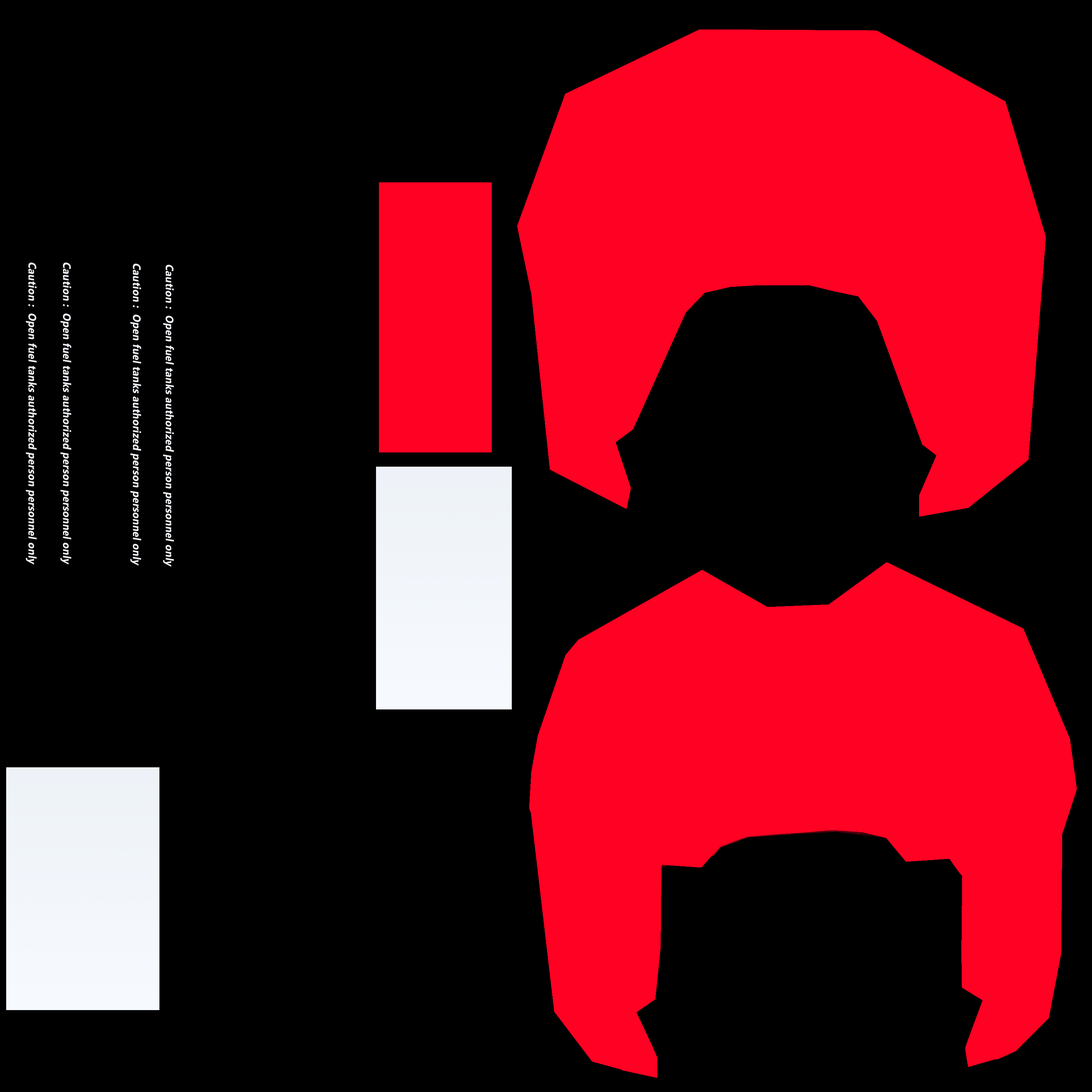
<style>
.page{position:relative;width:1092px;height:1092px;background:#000000}
.page>*{position:absolute;margin:0}
.t1{font:10.9px "MicrosoftTaiLe-Bold";letter-spacing:0.02em;color:#eff3f8;font-style:italic;scale:0.94 1}
</style>
<div class="page">
<p class="t1" style="left:26px;top:262px;width:11px;height:303px;rotate:90deg">Caution :  Open fuel tanks authorized person personnel only</p>
<p class="t1" style="left:60px;top:262px;width:11px;height:303px;rotate:90deg">Caution :  Open fuel tanks authorized person personnel only</p>
<p class="t1" style="left:130px;top:264px;width:11px;height:302px;rotate:90deg">Caution :  Open fuel tanks authorized person personnel only</p>
<p class="t1" style="left:163px;top:265px;width:11px;height:302px;rotate:90deg">Caution :  Open fuel tanks authorized person personnel only</p>
</div>
